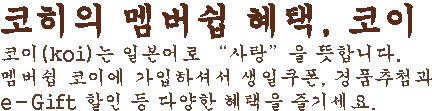
<style>
.page{position:relative;width:432px;height:111px;background:#ffffff}
.page>*{position:absolute;margin:0}
.t1{font:36px "Gungsuh";color:#592b18;font-weight:bold}
.t2{font:20px "H2gsrB";color:#5c3a2c}
.t3{font:20px "Gungsuh";color:#5c3a2c}
</style>
<div class="page">
<p class="t1" style="left:1px;top:3px;width:412px;height:36px">코히의 멤버쉽 혜택, 코이</p>
<p class="t2" style="left:1px;top:44px;width:432px;height:67px">코이(koi)는 일본어로 “사랑”을 뜻합니다.<br>멤버쉽 코이에 가입하셔서 생일쿠폰, 경품추첨과<br>e-Gift 할인 등 다양한 혜택을 즐기세요<span class="t3">.</span></p>
</div>
